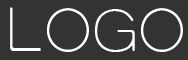
<style>
.page{position:relative;width:188px;height:60px;background:#333333}
.page>*{position:absolute;margin:0}
.t1{font:60px "HYe1gj";color:#ffffff}
</style>
<div class="page">
<p class="t1" style="left:10px;top:7px;width:173px;height:45px">LOGO</p>
</div>
